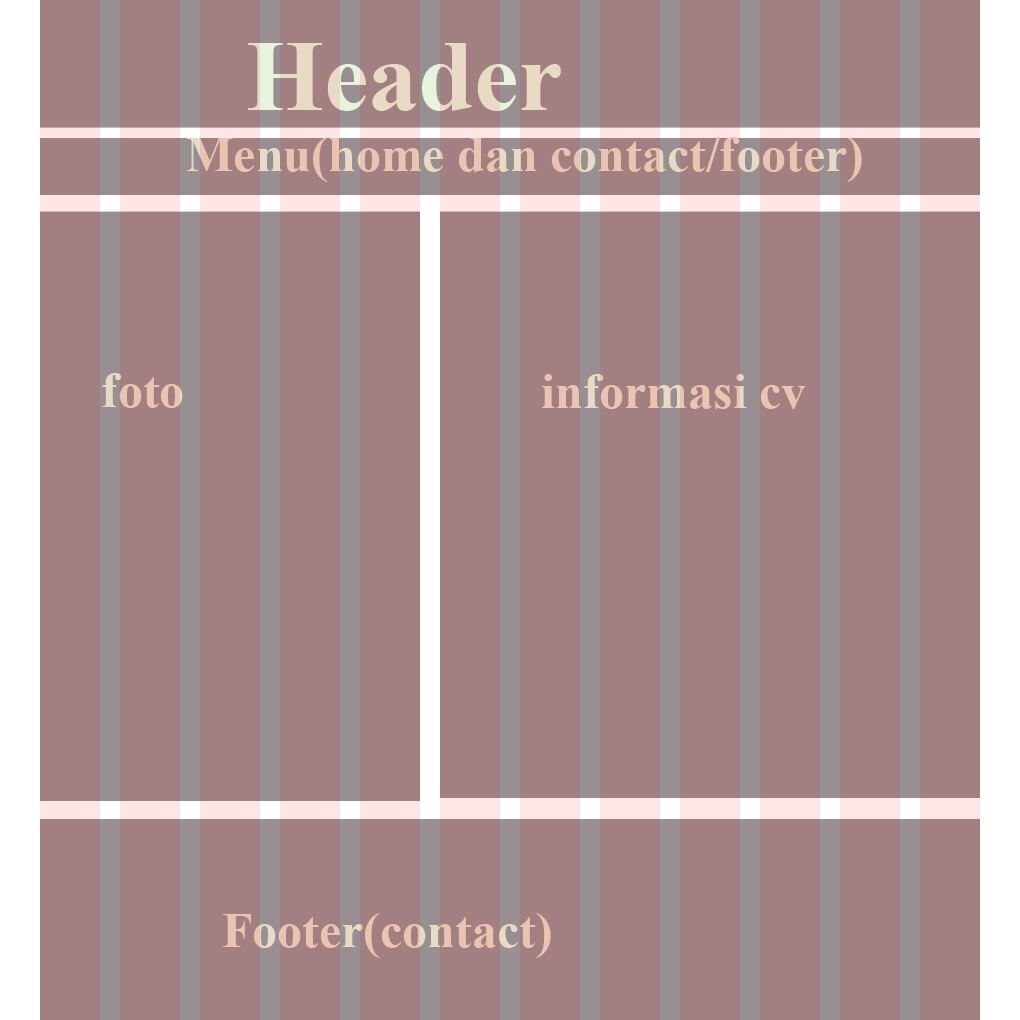
<style>
.page{position:relative;width:1020px;height:1020px;background:#a28082}
.page>*{position:absolute;margin:0}
.t1{font:100px "TimesNewRomanPS-BoldMT";color:#e9dac5}
.t2{font:50px "TimesNewRomanPS-BoldMT";color:#e9dac5}
</style>
<div class="page">
<p class="t1" style="left:248px;top:43px;width:313px;height:68px">Header</p>
<p class="t2" style="left:187px;top:137px;width:675px;height:45px">Menu(home dan contact/footer)</p>
<p class="t2" style="left:102px;top:373px;width:81px;height:35px">foto</p>
<p class="t2" style="left:542px;top:374px;width:264px;height:35px">informasi cv</p>
<p class="t2" style="left:223px;top:913px;width:328px;height:45px">Footer(contact)</p>
</div>
